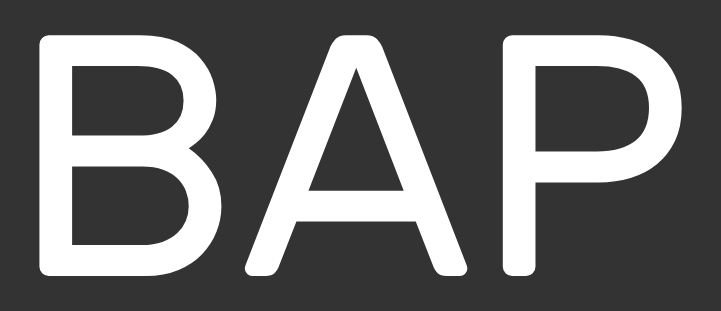
<style>
.page{position:relative;width:721px;height:311px;background:#333333}
.page>*{position:absolute;margin:0}
.t1{font:344px "Rubik-Regular";color:#ffffff}
</style>
<div class="page">
<p class="t1" style="left:39px;top:35px;width:643px;height:241px">BAP</p>
</div>
